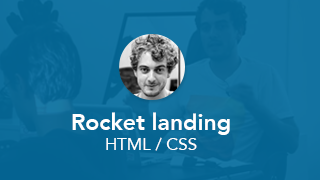
<style>
.page{position:relative;width:320px;height:180px}
.page>*{position:absolute;margin:0}
.t1{font:22.9px "Avenir-Heavy";color:#ffffff}
.t2{font:16.9px "Avenir-Roman";color:#ffffff}
</style>
<div class="page">
<p class="t1" style="left:72px;top:112px;width:158px;height:39px;text-align:center">Rocket landing<br><span class="t2">HTML / CSS</span></p>
</div>
